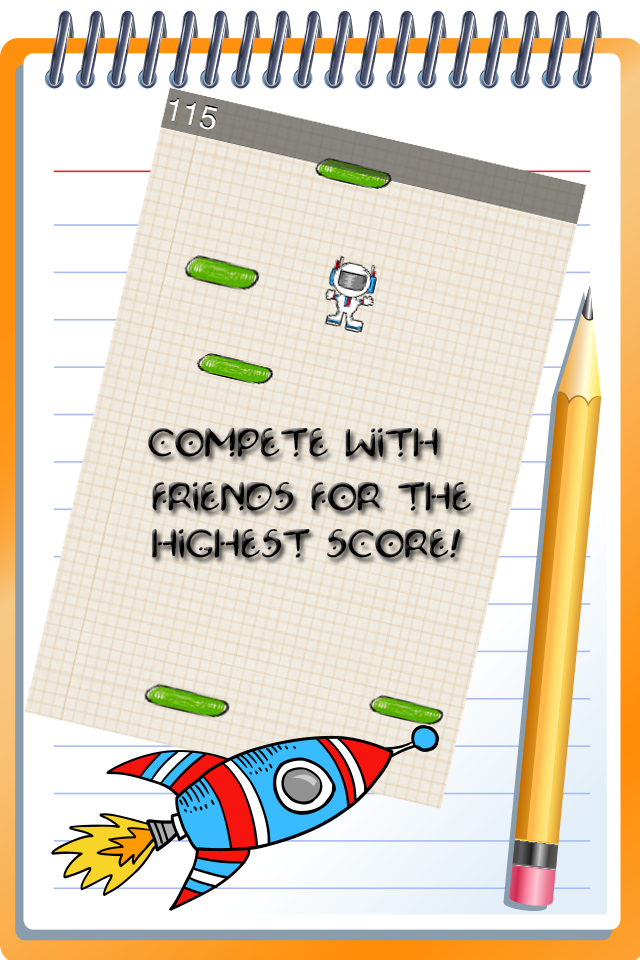
<style>
.page{position:relative;width:640px;height:960px;background:#ffffff}
.page>*{position:absolute;margin:0}
.t1{font:30px "Space-Pontiff-Regular";color:#000000}
</style>
<div class="page">
<p class="t1" style="left:148px;top:427px;width:290px;height:30px">compete with</p>
<p class="t1" style="left:152px;top:482px;width:319px;height:29px">friends for the</p>
<p class="t1" style="left:152px;top:529px;width:309px;height:29px">highest score!</p>
</div>
